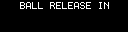
<style>
.page{position:relative;width:128px;height:32px;background:#000000}
.page>*{position:absolute;margin:0}
.t1{font:8px "Terminal";color:#ffffff}
</style>
<div class="page">
<p class="t1" style="left:20px;top:2px;width:89px;height:7px">BALL RELEASE IN</p>
</div>
